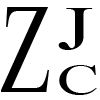
<style>
.page{position:relative;width:100px;height:100px;background:#ffffff}
.page>*{position:absolute;margin:0}
.t1{font:127.8px "TimesNewRomanPSMT";color:#000000;scale:0.66 1}
.t2{font:61.7px "TimesNewRomanPSMT";color:#000000;scale:1.5 1}
.t3{font:42.2px "TimesNewRomanPSMT";color:#000000;scale:1.5 1}
</style>
<div class="page">
<p class="t1" style="left:1px;top:7px;width:48px;height:85px">Z</p>
<p class="t2" style="left:58px;top:8px;width:35px;height:42px">J</p>
<p class="t3" style="left:59px;top:65px;width:38px;height:30px">C</p>
</div>
